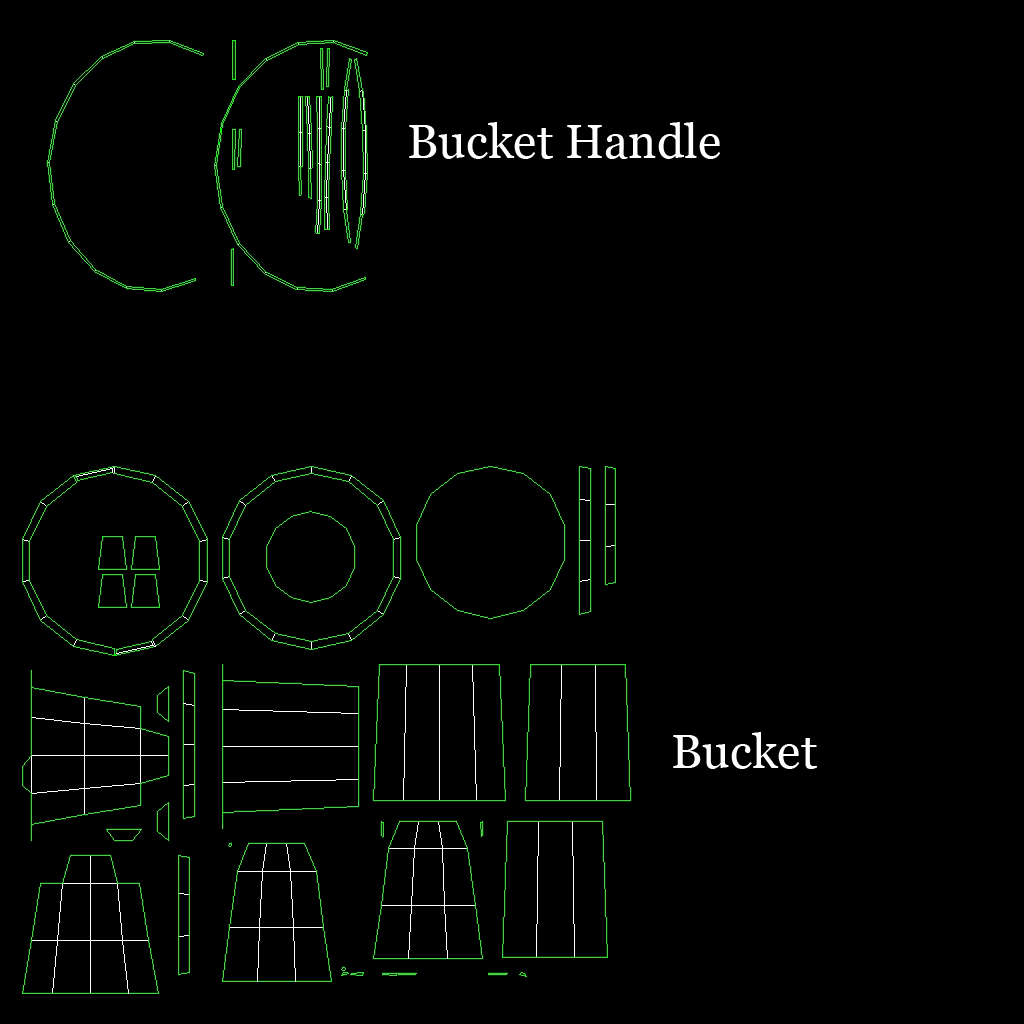
<style>
.page{position:relative;width:1024px;height:1024px;background:#000000}
.page>*{position:absolute;margin:0}
.t1{font:48px "Georgia";color:#ffffff}
</style>
<div class="page">
<p class="t1" style="left:409px;top:122px;width:312px;height:37px">Bucket Handle</p>
<p class="t1" style="left:673px;top:732px;width:144px;height:37px">Bucket</p>
</div>
